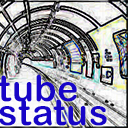
<style>
.page{position:relative;width:128px;height:128px}
.page>*{position:absolute;margin:0}
.t1{font:36px/24px "ArialRoundedMTBold";letter-spacing:0.02em;color:#1805c7}
</style>
<div class="page">
<p class="t1" style="left:0px;top:74px;width:107px;height:52px">tube <br>status</p>
</div>
